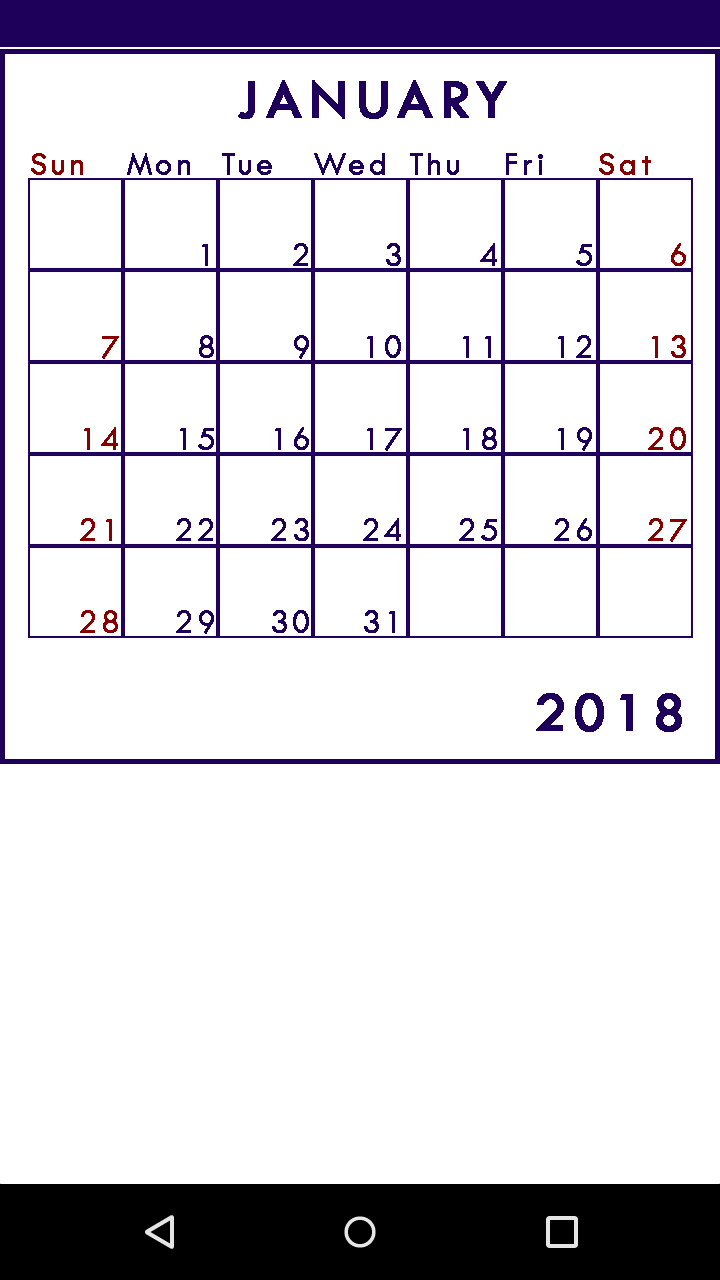
<style>
.page{position:relative;width:720px;height:1280px;background:#ffffff}
.page>*{position:absolute;margin:0}
.t1{font:58.3px "TwCenMT-Regular";letter-spacing:0.1em;color:#1e005a;font-weight:bold}
.t2{font:33.3px/91.7px "TwCenMT-Regular";letter-spacing:0.1em;color:#870000;font-weight:bold}
.t3{font:33.3px/91.7px "TwCenMT-Regular";letter-spacing:0.1em;color:#1e005a;font-weight:bold}
</style>
<div class="page">
<p class="t1" style="left:238px;top:80px;width:269px;height:39px">JANUARY</p>
<p class="t2" style="left:31px;top:153px;width:88px;height:480px">Sun<br><br>7<br>14<br>21<br>28</p>
<p class="t3" style="left:127px;top:153px;width:87px;height:481px">Mon<br>1<br>8<br>15<br>22<br>29</p>
<p class="t3" style="left:222px;top:153px;width:87px;height:480px">Tue<br>2<br>9<br>16<br>23<br>30</p>
<p class="t3" style="left:314px;top:153px;width:88px;height:480px">Wed<br>3<br>10<br>17<br>24<br>31</p>
<p class="t3" style="left:410px;top:153px;width:87px;height:388px">Thu<br>4<br>11<br>18<br>25</p>
<p class="t3" style="left:506px;top:153px;width:86px;height:388px">Fri<br>5<br>12<br>19<br>26</p>
<p class="t2" style="left:599px;top:153px;width:88px;height:389px">Sat<br>6<br>13<br>20<br>27</p>
<p class="t1" style="left:536px;top:693px;width:146px;height:39px">2018</p>
</div>
